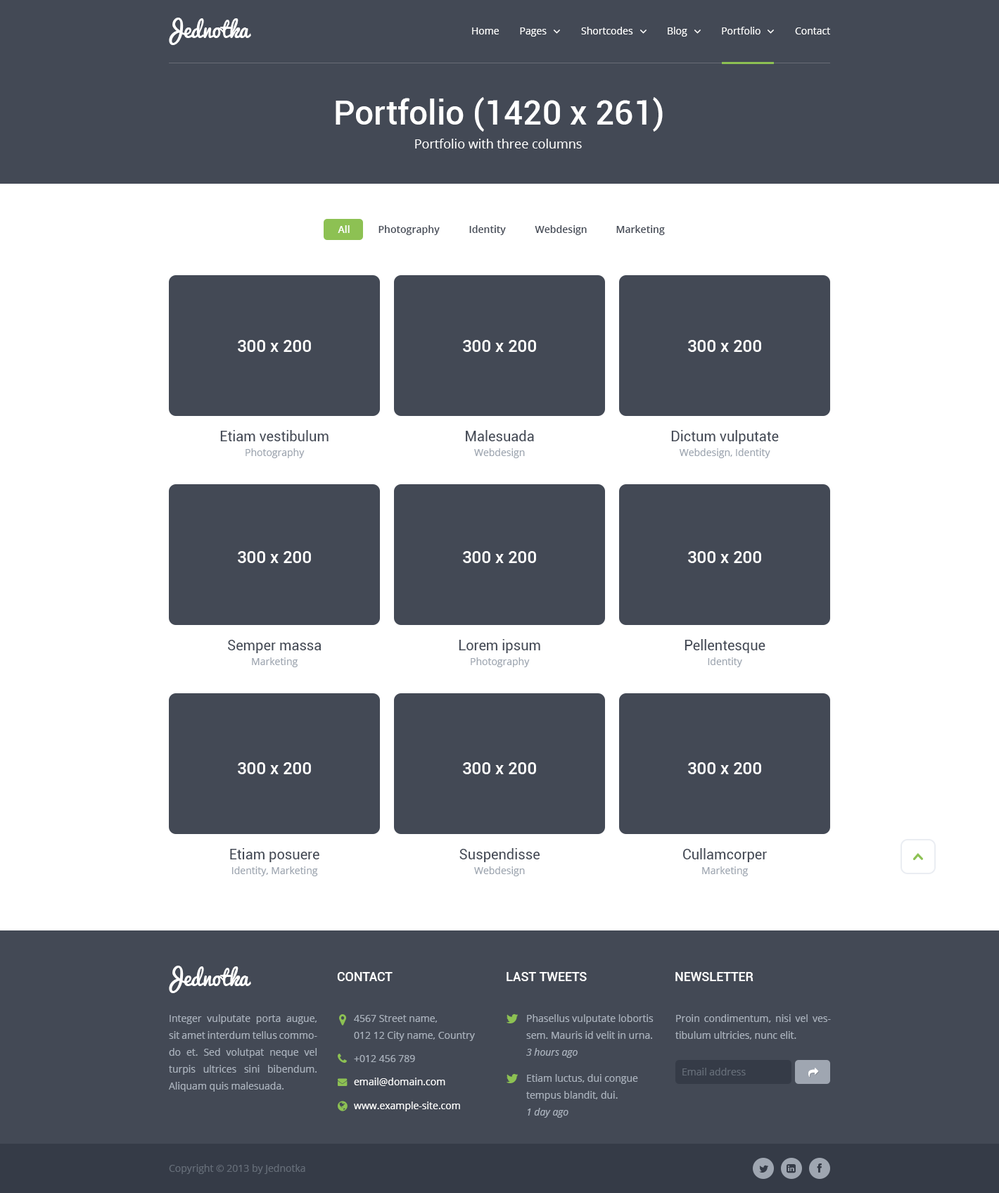
<style>
.page{position:relative;width:999px;height:1193px;background:#434955}
.page>*{position:absolute;margin:0}
.t1{font:21.1px "Pacifico";color:#ffffff}
.t2{font:9.9px "OpenSans";color:#ffffff}
.t3{font:33.8px "Roboto-Medium";color:#ffffff}
.t4{font:12.7px "OpenSans";color:#ffffff}
.t5{font:9.9px "OpenSans-Semibold";color:#ffffff}
.t6{font:9.9px "OpenSans-Semibold";color:#434955}
.t7{font:16.9px "Roboto-Medium";color:#ffffff}
.t8{font:14.1px "Roboto-Regular";color:#434955}
.t9{font:9.9px "OpenSans";color:#9ca4af}
.t10{font:12.7px "Roboto-Medium";color:#ffffff;text-transform:uppercase}
.t11{font:9.9px/16.9px "OpenSans";color:#aab2bd}
.t12{font:9.9px "OpenSans-Italic";color:#aab2bd}
.t13{font:9.9px "OpenSans";color:#aab2bd}
.t14{font:9.9px "OpenSans";color:#656d78}
</style>
<div class="page">
<p class="t1" style="left:169px;top:18px;width:82px;height:27px">Jednotka</p>
<p class="t2" style="left:472px;top:27px;width:27px;height:7px">Home</p>
<p class="t2" style="left:520px;top:27px;width:27px;height:10px">Pages</p>
<p class="t2" style="left:581px;top:27px;width:52px;height:7px">Shortcodes</p>
<p class="t2" style="left:668px;top:27px;width:20px;height:10px">Blog</p>
<p class="t2" style="left:722px;top:27px;width:39px;height:7px">Portfolio</p>
<p class="t2" style="left:795px;top:27px;width:36px;height:7px">Contact</p>
<p class="t3" style="left:336px;top:97px;width:327px;height:35px">Portfolio (1420 x 261)</p>
<p class="t4" style="left:415px;top:139px;width:167px;height:10px">Portfolio with three columns</p>
<p class="t5" style="left:338px;top:225px;width:12px;height:8px">All</p>
<p class="t6" style="left:379px;top:225px;width:61px;height:10px">Photography</p>
<p class="t6" style="left:469px;top:225px;width:37px;height:10px">Identity</p>
<p class="t6" style="left:535px;top:225px;width:52px;height:10px">Webdesign</p>
<p class="t6" style="left:617px;top:225px;width:48px;height:10px">Marketing</p>
<p class="t7" style="left:238px;top:340px;width:73px;height:12px">300 x 200</p>
<p class="t7" style="left:463px;top:340px;width:73px;height:12px">300 x 200</p>
<p class="t7" style="left:688px;top:340px;width:74px;height:12px">300 x 200</p>
<p class="t8" style="left:220px;top:430px;width:109px;height:11px">Etiam vestibulum</p>
<p class="t8" style="left:466px;top:430px;width:68px;height:11px">Malesuada</p>
<p class="t8" style="left:671px;top:430px;width:108px;height:14px">Dictum vulputate</p>
<p class="t9" style="left:246px;top:448px;width:59px;height:10px">Photography</p>
<p class="t9" style="left:474px;top:448px;width:51px;height:10px">Webdesign</p>
<p class="t9" style="left:679px;top:448px;width:92px;height:10px">Webdesign, Identity</p>
<p class="t7" style="left:238px;top:551px;width:73px;height:12px">300 x 200</p>
<p class="t7" style="left:463px;top:551px;width:73px;height:12px">300 x 200</p>
<p class="t7" style="left:688px;top:551px;width:74px;height:12px">300 x 200</p>
<p class="t8" style="left:228px;top:640px;width:94px;height:13px">Semper massa</p>
<p class="t8" style="left:459px;top:639px;width:82px;height:14px">Lorem ipsum</p>
<p class="t8" style="left:685px;top:639px;width:81px;height:14px">Pellentesque</p>
<p class="t9" style="left:252px;top:657px;width:46px;height:10px">Marketing</p>
<p class="t9" style="left:471px;top:657px;width:59px;height:10px">Photography</p>
<p class="t9" style="left:708px;top:657px;width:35px;height:10px">Identity</p>
<p class="t7" style="left:238px;top:762px;width:73px;height:12px">300 x 200</p>
<p class="t7" style="left:463px;top:762px;width:73px;height:12px">300 x 200</p>
<p class="t7" style="left:688px;top:762px;width:74px;height:12px">300 x 200</p>
<p class="t8" style="left:230px;top:848px;width:90px;height:14px">Etiam posuere</p>
<p class="t8" style="left:460px;top:848px;width:81px;height:14px">Suspendisse</p>
<p class="t8" style="left:683px;top:848px;width:84px;height:14px">Cullamcorper</p>
<p class="t9" style="left:232px;top:866px;width:86px;height:10px">Identity, Marketing</p>
<p class="t9" style="left:474px;top:866px;width:51px;height:10px">Webdesign</p>
<p class="t9" style="left:702px;top:866px;width:46px;height:10px">Marketing</p>
<p class="t1" style="left:169px;top:966px;width:82px;height:27px">Jednotka</p>
<p class="t10" style="left:337px;top:972px;width:56px;height:9px">CONTACT</p>
<p class="t10" style="left:507px;top:972px;width:80px;height:9px">Last tweets</p>
<p class="t10" style="left:676px;top:972px;width:78px;height:9px">Newsletter</p>
<p class="t11" style="left:169px;top:1014px;width:148px;height:78px;text-align:justify">Integer vulputate porta augue, sit amet interdum tellus commodo et. Sed volutpat neque vel turpis ultrices sini bibendum. Aliquam quis malesuada.</p>
<p class="t11" style="left:354px;top:1015px;width:121px;height:26px">4567 Street name, <br>012 12 City name, Country</p>
<p class="t11" style="left:526px;top:1014px;width:128px;height:25px">Phasellus vulputate lobortis sem. Mauris id velit in urna.</p>
<p class="t11" style="left:676px;top:1014px;width:155px;height:26px;text-align:justify">Proin condimentum, nisi vel vestibulum ultricies, nunc elit.</p>
<p class="t12" style="left:526px;top:1048px;width:52px;height:10px">3 hours ago</p>
<p class="t13" style="left:354px;top:1055px;width:61px;height:7px">+012 456 789</p>
<p class="t14" style="left:683px;top:1068px;width:63px;height:8px">Email address</p>
<p class="t2" style="left:354px;top:1078px;width:92px;height:8px">email@domain.com</p>
<p class="t11" style="left:526px;top:1074px;width:112px;height:27px">Etiam luctus, dui congue tempus blandit, dui.</p>
<p class="t2" style="left:354px;top:1102px;width:106px;height:9px">www.example-site.com</p>
<p class="t12" style="left:528px;top:1108px;width:41px;height:10px">1 day ago</p>
<p class="t14" style="left:169px;top:1164px;width:136px;height:10px">Copyright © 2013 by Jednotka</p>
</div>
